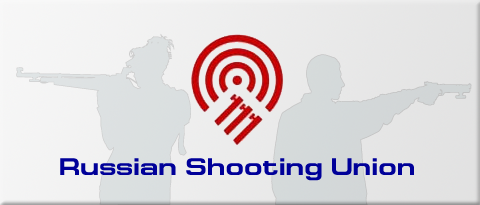
<style>
.page{position:relative;width:480px;height:205px}
.page>*{position:absolute;margin:0}
.t1{font:24px "EuropeExtBold";color:#000099}
</style>
<div class="page">
<p class="t1" style="left:60px;top:158px;width:354px;height:23px">Russian Shooting Union</p>
</div>
